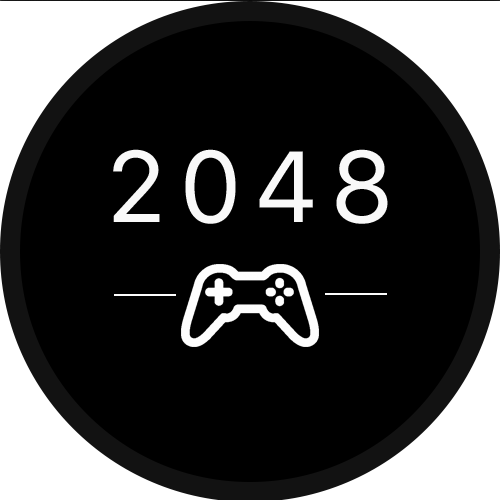
<style>
.page{position:relative;width:500px;height:500px;background:#000000}
.page>*{position:absolute;margin:0}
.t1{font:100px "SFText-Regular";letter-spacing:0.12em;color:#f9f9f9}
</style>
<div class="page">
<p class="t1" style="left:113px;top:148px;width:275px;height:75px">2048</p>
</div>
